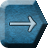
<style>
.page{position:relative;width:48px;height:48px}
.page>*{position:absolute;margin:0}
.t1{font:40.5px "ArialMT";font-weight:bold;scale:0.67 1}
</style>
<div class="page">
<p class="t1" style="left:10px;top:16px;width:26px;height:16px">→</p>
</div>
